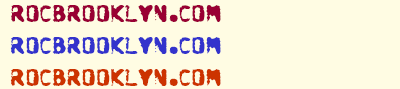
<style>
.page{position:relative;width:400px;height:89px;background:#fffce3}
.page>*{position:absolute;margin:0}
.t1{font:26.7px "DoomsDay";color:#990033}
.t2{font:26.7px "DoomsDay";color:#3333cc}
.t3{font:26.7px "DoomsDay";color:#cc3300}
</style>
<div class="page">
<p class="t1" style="left:10px;top:5px;width:211px;height:81px">rocbrooklyn.com<br><span class="t2">Rocbrooklyn.com<br></span><span class="t3">Rocbrooklyn.com</span></p>
</div>
